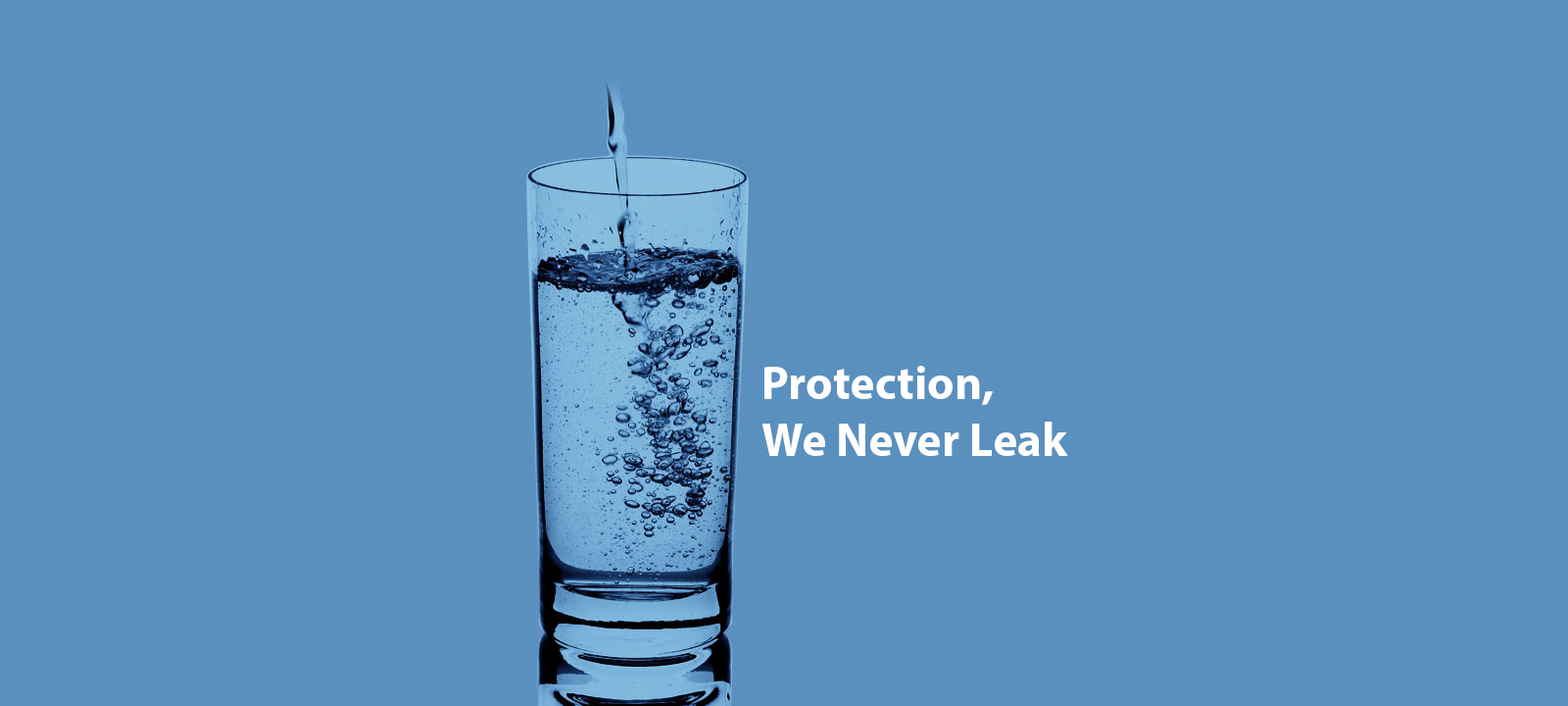
<style>
.page{position:relative;width:1568px;height:706px;background:#5a90be}
.page>*{position:absolute;margin:0}
.t1{font:47px "MyriadPro-Bold";color:#ffffff}
</style>
<div class="page">
<p class="t1" style="left:761px;top:366px;width:307px;height:90px">Protection,<br>We Never Leak</p>
</div>
